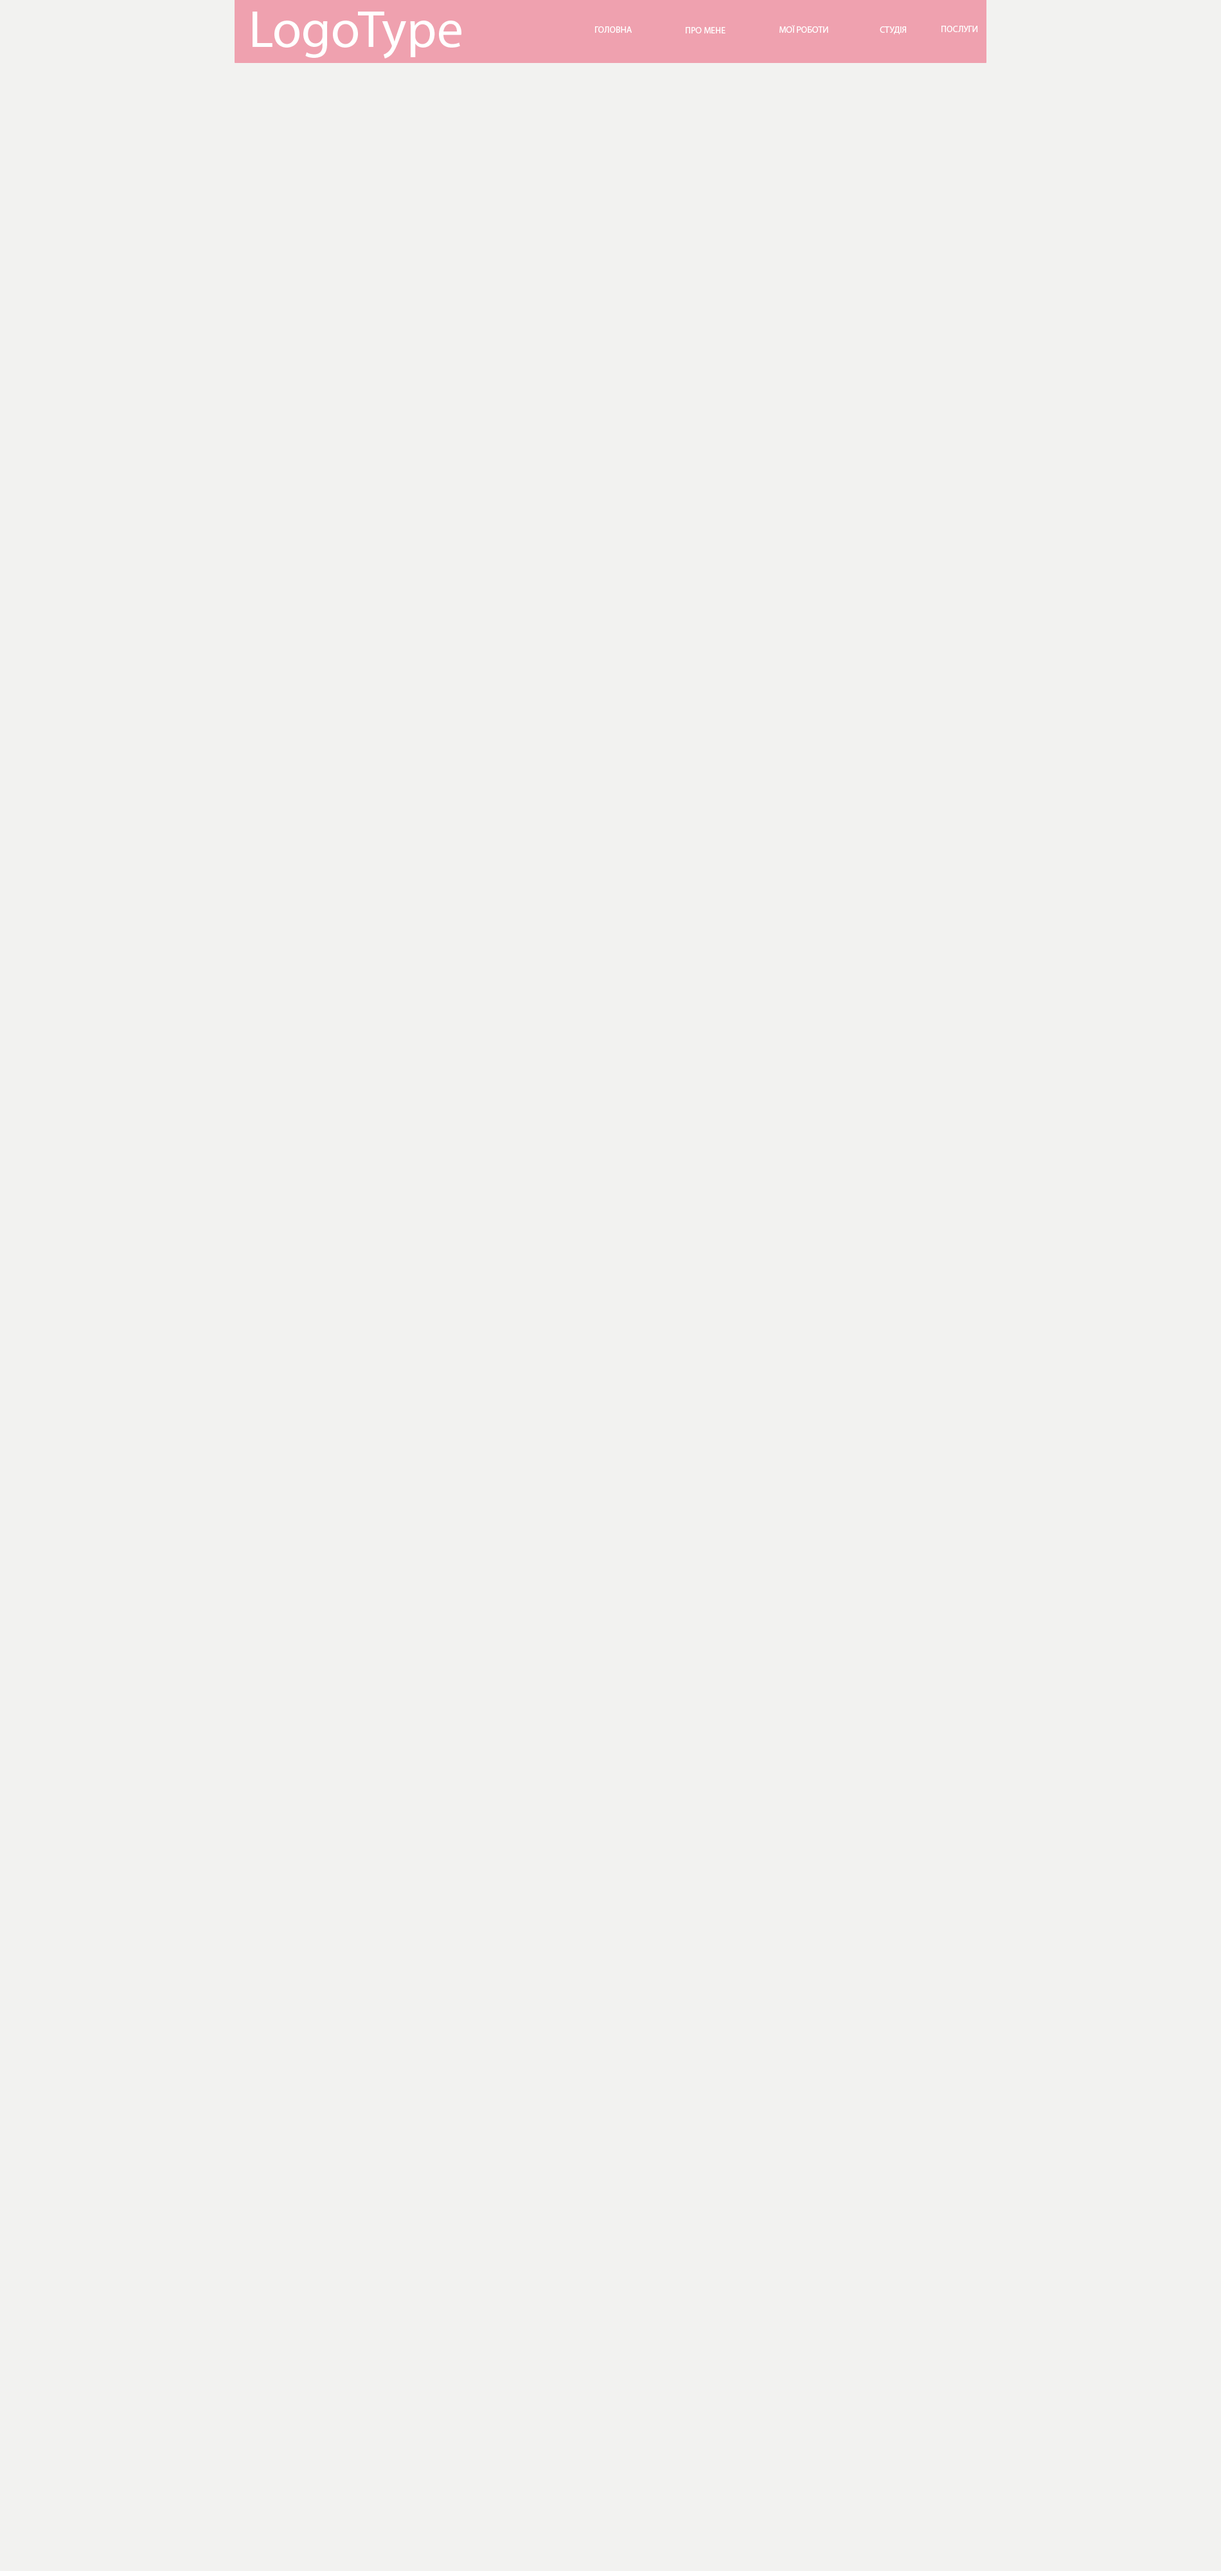
<style>
.page{position:relative;width:1221px;height:2571px;background:#f2f2f0}
.page>*{position:absolute;margin:0}
.t1{font:52.7px "MyriadPro-Regular";color:#ffffff}
.t2{font:9px "MyriadPro-Regular";color:#ffffff;text-transform:uppercase}
</style>
<div class="page">
<p class="t1" style="left:253px;top:12px;width:209px;height:47px">LogoType</p>
<p class="t2" style="left:595px;top:26px;width:37px;height:7px">Головна</p>
<p class="t2" style="left:686px;top:27px;width:40px;height:6px">Про мене</p>
<p class="t2" style="left:780px;top:25px;width:49px;height:8px">Мої роботи</p>
<p class="t2" style="left:880px;top:26px;width:26px;height:9px">Cтудія</p>
<p class="t2" style="left:942px;top:26px;width:36px;height:6px">Послуги</p>
</div>
